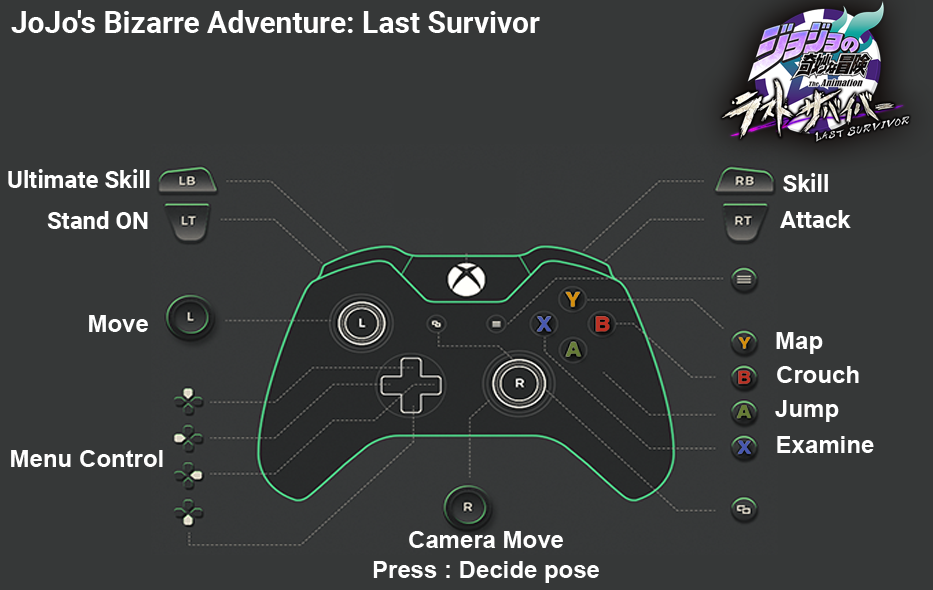
<style>
.page{position:relative;width:933px;height:590px;background:#363838}
.page>*{position:absolute;margin:0}
.t1{font:30px "Roboto-Bold";color:#ffffff}
.t2{font:24px "Roboto-Bold";color:#ffffff}
.t3{font:24px "Arial-BoldMT";color:#fefefe}
.t4{font:24px/30px "Arial-BoldMT";color:#fefefe}
</style>
<div class="page">
<p class="t1" style="left:11px;top:10px;width:529px;height:23px">JoJo's Bizarre Adventure: Last Survivor</p>
<p class="t2" style="left:8px;top:169px;width:142px;height:19px">Ultimate Skill</p>
<p class="t2" style="left:783px;top:173px;width:45px;height:19px">Skill</p>
<p class="t2" style="left:47px;top:211px;width:101px;height:18px">Stand ON</p>
<p class="t2" style="left:780px;top:210px;width:71px;height:18px">Attack</p>
<p class="t3" style="left:89px;top:315px;width:59px;height:17px">Move</p>
<p class="t3" style="left:776px;top:332px;width:47px;height:22px">Map</p>
<p class="t3" style="left:777px;top:366px;width:82px;height:17px">Crouch</p>
<p class="t3" style="left:775px;top:400px;width:64px;height:22px">Jump</p>
<p class="t3" style="left:777px;top:436px;width:97px;height:17px">Examine</p>
<p class="t3" style="left:11px;top:450px;width:152px;height:17px">Menu Control</p>
<p class="t4" style="left:373px;top:531px;width:226px;height:52px;text-align:center">Camera Move<br>Press : Decide pose</p>
</div>
